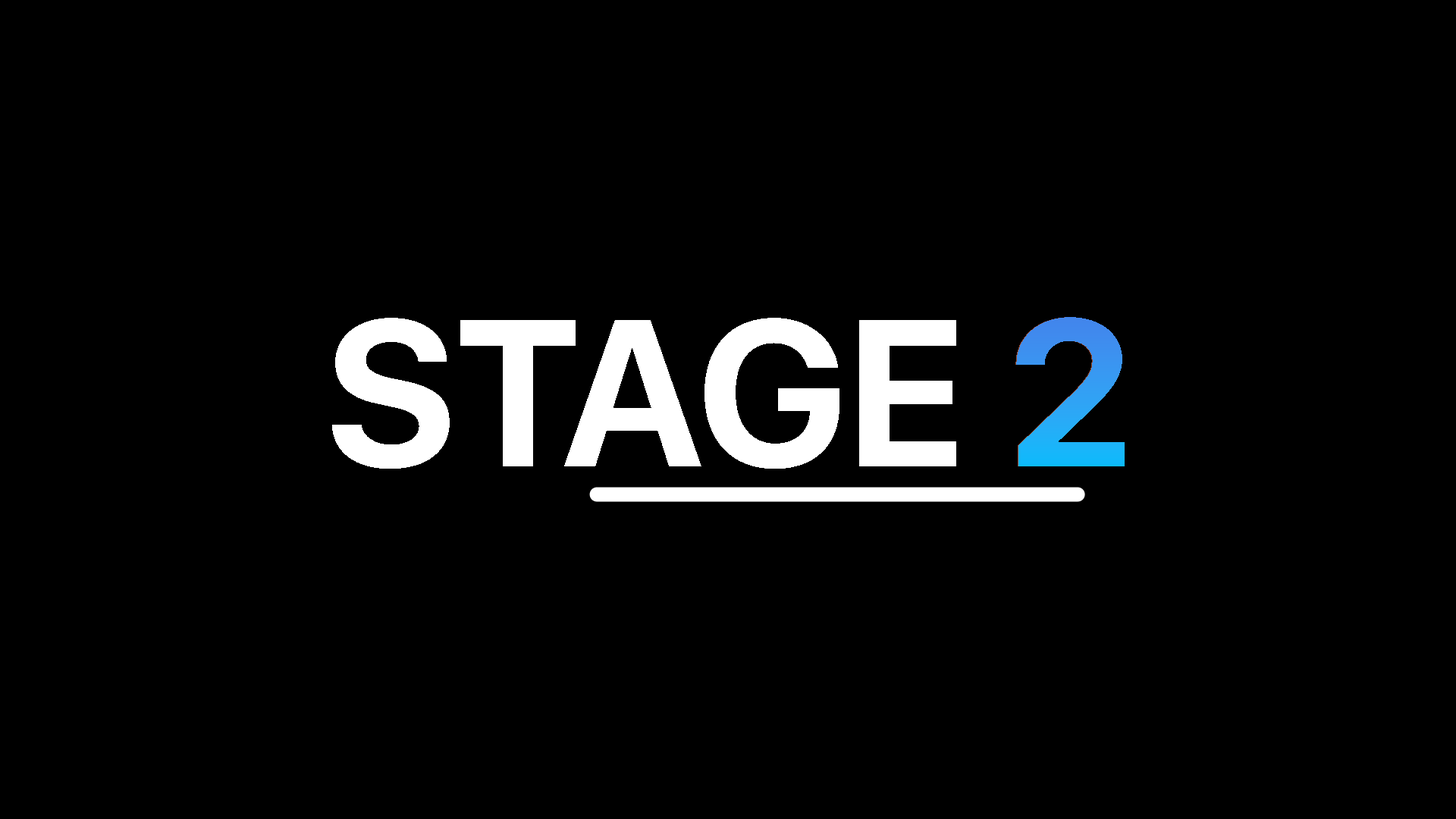
<style>
.page{position:relative;width:1456px;height:819px;background:#000000}
.page>*{position:absolute;margin:0}
.t1{font:207.2px "SFProDisplay-Bold";color:#ffffff;text-transform:uppercase}
.t2{font:207.2px "SFProDisplay-Bold";color:#9d4d30;text-transform:uppercase}
</style>
<div class="page">
<p class="t1" style="left:332px;top:317px;width:792px;height:152px">Stage<span class="t2"> 2</span></p>
</div>
